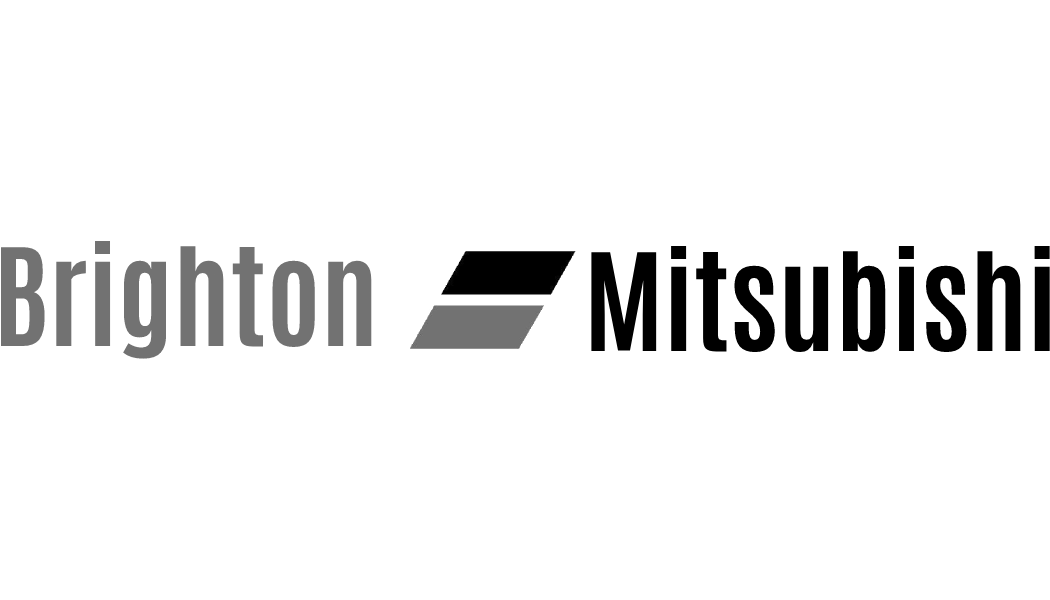
<style>
.page{position:relative;width:1050px;height:600px;background:#ffffff}
.page>*{position:absolute;margin:0}
.t1{font:115px "Antonio-Bold";color:#727272}
.t2{font:115px "Antonio-Bold";color:#000000}
</style>
<div class="page">
<p class="t1" style="left:0px;top:241px;width:372px;height:118px">Brighton</p>
<p class="t2" style="left:591px;top:246px;width:459px;height:107px">Mitsubishi</p>
</div>
